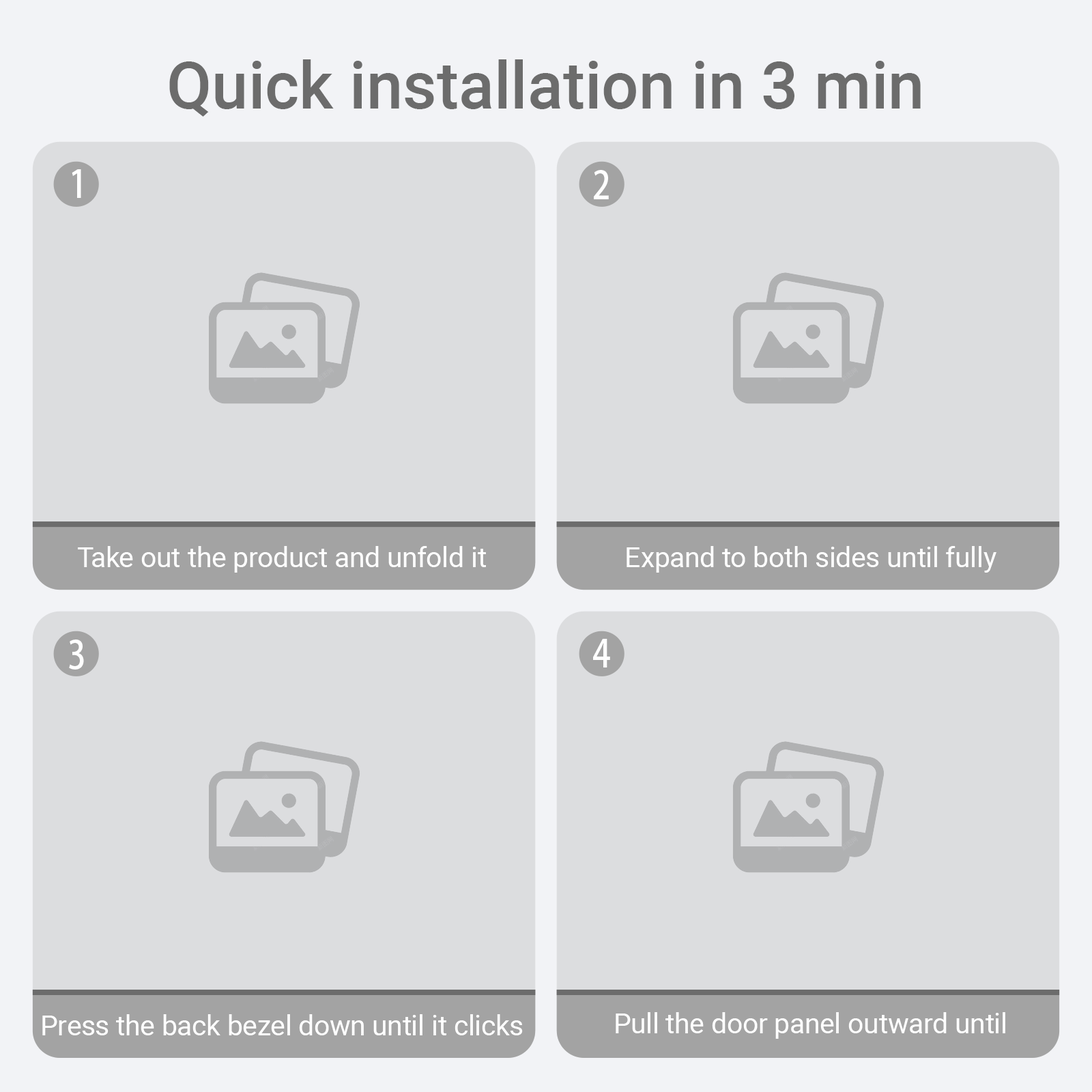
<style>
.page{position:relative;width:1092px;height:1092px;background:#dcdddf}
.page>*{position:absolute;margin:0}
.t1{font:65.5px "Roboto-Medium";color:#6c6c6c}
.t2{font:38.2px "AdobeHeitiStd-Regular";color:#ffffff;scale:0.85 1}
.t3{font:27.7px "Roboto-Regular";color:#ffffff}
</style>
<div class="page">
<p class="t1" style="left:169px;top:59px;width:752px;height:58px">Quick installation in 3 min</p>
<p class="t2" style="left:72px;top:169px;width:9px;height:29px">1</p>
<p class="t2" style="left:594px;top:170px;width:15px;height:29px">2</p>
<p class="t3" style="left:78px;top:546px;width:408px;height:27px">Take out the product and unfold it</p>
<p class="t3" style="left:627px;top:546px;width:369px;height:27px">Expand to both sides until fully</p>
<p class="t2" style="left:69px;top:639px;width:15px;height:31px">3</p>
<p class="t2" style="left:593px;top:639px;width:17px;height:28px">4</p>
<p class="t3" style="left:616px;top:1012px;width:389px;height:27px">Pull the door panel outward until</p>
<p class="t3" style="left:42px;top:1014px;width:481px;height:21px">Press the back bezel down until it clicks</p>
</div>
